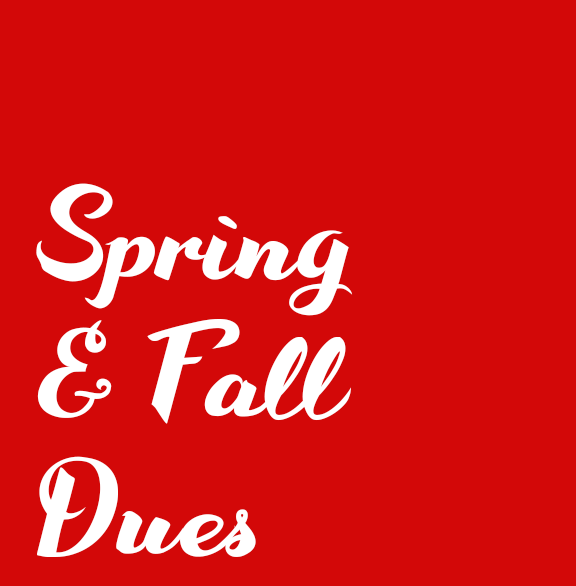
<style>
.page{position:relative;width:576px;height:586px;background:#d30808}
.page>*{position:absolute;margin:0}
.t1{font:115.3px "WakeUpBro";color:#ffffff}
</style>
<div class="page">
<p class="t1" style="left:36px;top:183px;width:317px;height:374px">Spring <br>&amp; Fall<br>Dues</p>
</div>
